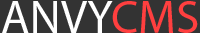
<style>
.page{position:relative;width:200px;height:33px;background:#333333}
.page>*{position:absolute;margin:0}
.t1{font:47px "MyriadPro-Regular";color:#ffffff}
.t2{font:47px "MyriadPro-Regular";color:#ff3f3f}
</style>
<div class="page">
<p class="t1" style="left:2px;top:1px;width:196px;height:32px">ANVY<span class="t2">CMS</span></p>
</div>
